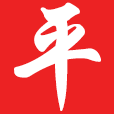
<style>
.page{position:relative;width:114px;height:114px;background:#ec2223}
.page>*{position:absolute;margin:0}
.t1{font:112px "FZXKFW--GB1-0";color:#ffffff;font-weight:bold}
</style>
<div class="page">
<p class="t1" style="left:14px;top:2px;width:87px;height:109px">平</p>
</div>
